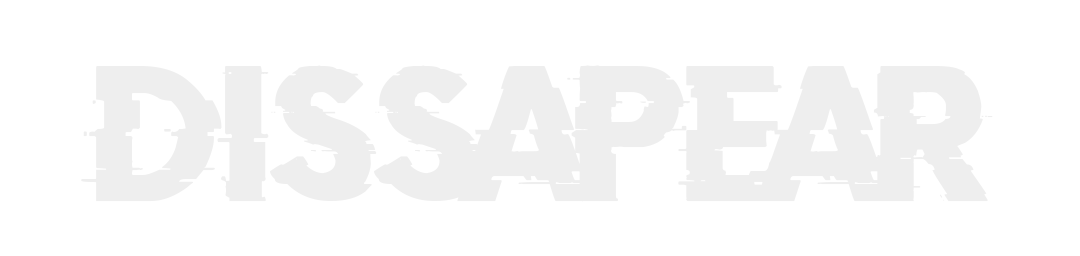
<style>
.page{position:relative;width:1080px;height:256px;background:#ffffff}
.page>*{position:absolute;margin:0}
.t1{font:150px "DoctorGlitch";color:#eeeeee}
</style>
<div class="page">
<p class="t1" style="left:81px;top:65px;width:912px;height:137px">DISSAPEAR</p>
</div>
